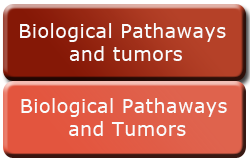
<style>
.page{position:relative;width:250px;height:166px}
.page>*{position:absolute;margin:0}
.t1{font:19px "Verdana";letter-spacing:0.025em;color:#f9fbfc}
</style>
<div class="page">
<p class="t1" style="left:20px;top:23px;width:206px;height:38px;text-align:center">Biological Pathaways<br> and tumors</p>
<p class="t1" style="left:21px;top:98px;width:206px;height:38px;text-align:center">Biological Pathaways <br>and Tumors</p>
</div>
